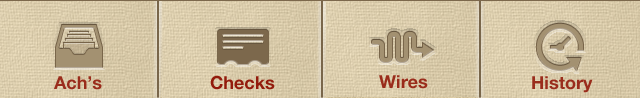
<style>
.page{position:relative;width:640px;height:98px}
.page>*{position:absolute;margin:0}
.t1{font:18px "HelveticaNeue-Bold";color:#931b0c}
</style>
<div class="page">
<p class="t1" style="left:54px;top:76px;width:48px;height:14px;opacity:0.9">Ach’s</p>
<p class="t1" style="left:210px;top:75px;width:65px;height:15px">Checks</p>
<p class="t1" style="left:379px;top:75px;width:49px;height:14px;opacity:0.9">Wires</p>
<p class="t1" style="left:532px;top:76px;width:61px;height:17px;opacity:0.9">History</p>
</div>
